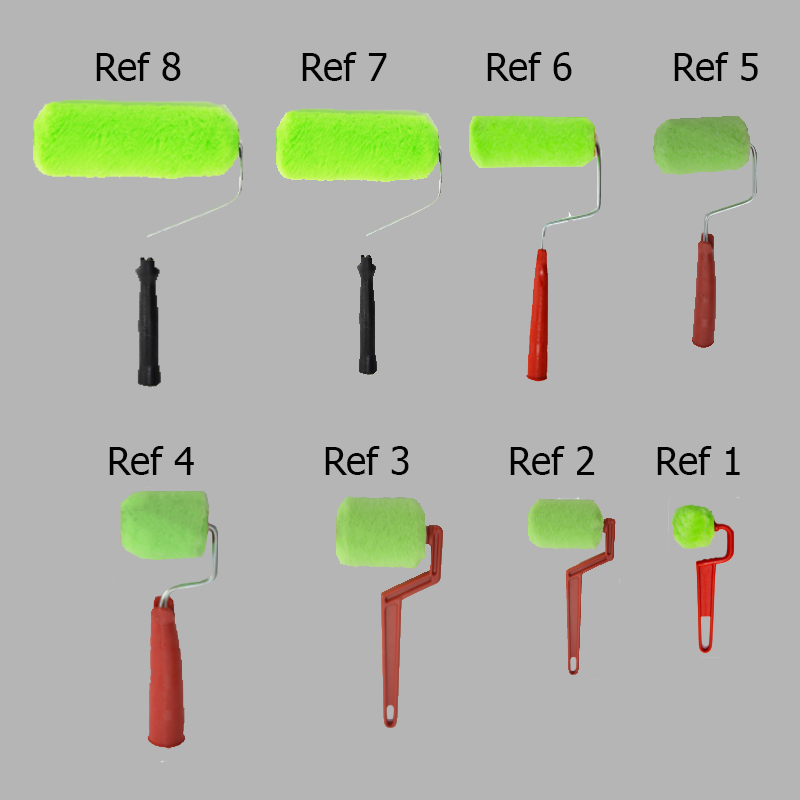
<style>
.page{position:relative;width:800px;height:800px;background:#b5b5b5}
.page>*{position:absolute;margin:0}
.t1{font:38px "Tahoma";color:#020202}
</style>
<div class="page">
<p class="t1" style="left:96px;top:52px;width:85px;height:29px">Ref 8</p>
<p class="t1" style="left:302px;top:52px;width:85px;height:29px">Ref 7</p>
<p class="t1" style="left:487px;top:52px;width:85px;height:29px">Ref 6</p>
<p class="t1" style="left:674px;top:52px;width:84px;height:29px">Ref 5</p>
<p class="t1" style="left:109px;top:446px;width:85px;height:29px">Ref 4</p>
<p class="t1" style="left:325px;top:446px;width:84px;height:29px">Ref 3</p>
<p class="t1" style="left:510px;top:446px;width:85px;height:29px">Ref 2</p>
<p class="t1" style="left:657px;top:446px;width:83px;height:29px">Ref 1</p>
</div>
